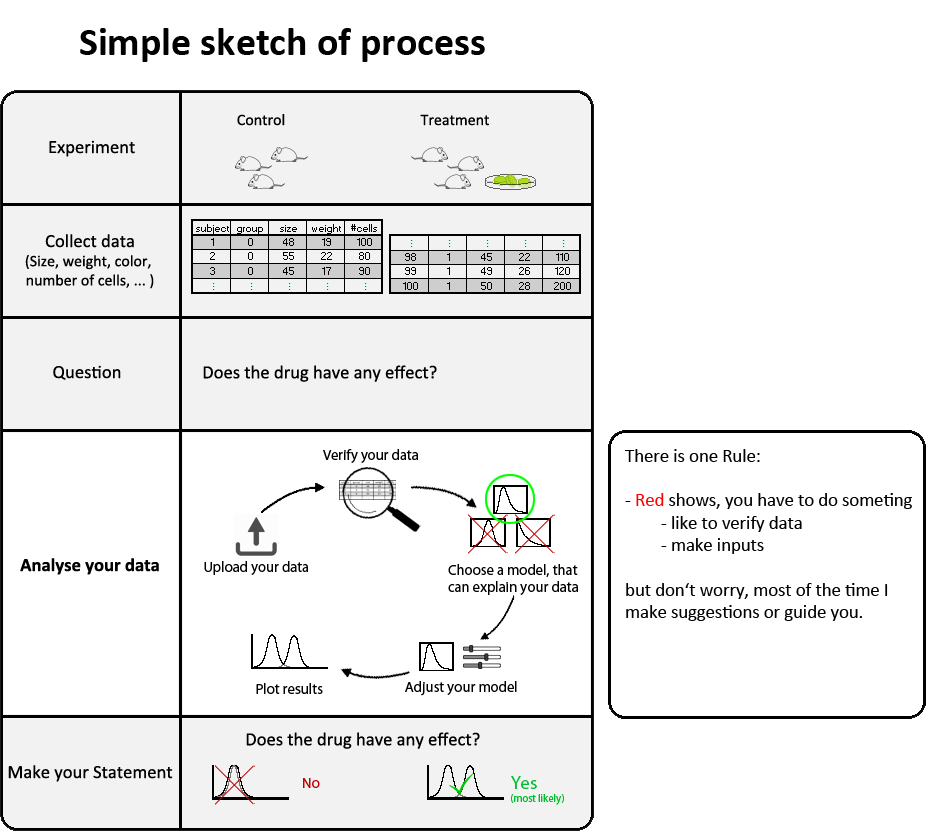
<style>
.page{position:relative;width:944px;height:831px;background:#ffffff}
.page>*{position:absolute;margin:0}
.t1{font:40px "Calibri-Bold";color:#000000}
.t2{font:16px "Calibri";color:#000000}
.t3{font:18.7px "Calibri";color:#000000}
.t4{font:14.7px "MyriadPro-Regular";color:#000000}
.t5{font:18.7px "Calibri";color:#ff0000}
.t6{font:18.7px "Calibri-Bold";color:#000000}
.t7{font:14.7px "MyriadPro-Regular";color:#c70000}
.t8{font:10.7px "MyriadPro-Regular";color:#00c72f}
.t9{font:18.7px "MyriadPro-Regular";color:#00c72f}
</style>
<div class="page">
<p class="t1" style="left:80px;top:28px;width:405px;height:34px">Simple sketch of process</p>
<p class="t2" style="left:237px;top:114px;width:48px;height:12px">Control</p>
<p class="t2" style="left:420px;top:114px;width:69px;height:12px">Treatment</p>
<p class="t3" style="left:49px;top:140px;width:86px;height:17px">Experiment</p>
<p class="t2" style="left:25px;top:234px;width:129px;height:55px;text-align:center"><span class="t3">Collect data<br></span>(Size, weight, color, <br>number of cells, ... )</p>
<p class="t3" style="left:53px;top:365px;width:68px;height:15px">Question</p>
<p class="t3" style="left:203px;top:365px;width:234px;height:17px">Does the drug have any effect?</p>
<p class="t4" style="left:323px;top:449px;width:95px;height:14px">Verify your data</p>
<p class="t3" style="left:625px;top:449px;width:287px;height:172px">There is one Rule:<br><br>- <span class="t5">Red </span>shows, you have to do someting<br> - like to verify data<br> - make inputs<br><br>but don‘t worry, most of the time I make suggestions or guide you.</p>
<p class="t6" style="left:20px;top:558px;width:139px;height:17px">Analyse your data</p>
<p class="t4" style="left:204px;top:561px;width:104px;height:14px">Upload your data</p>
<p class="t4" style="left:448px;top:564px;width:130px;height:31px">Choose a model, that <br>can explain your data</p>
<p class="t4" style="left:256px;top:683px;width:67px;height:11px">Plot results</p>
<p class="t4" style="left:405px;top:681px;width:112px;height:15px">Adjust your model</p>
<p class="t3" style="left:246px;top:732px;width:234px;height:17px">Does the drug have any effect?</p>
<p class="t3" style="left:8px;top:765px;width:165px;height:17px">Make your Statement</p>
<p class="t7" style="left:303px;top:778px;width:17px;height:10px">No</p>
<p class="t8" style="left:511px;top:776px;width:53px;height:29px"><span class="t9">Yes <br></span>(most likely)</p>
</div>
